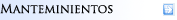
<style>
.page{position:relative;width:177px;height:20px}
.page>*{position:absolute;margin:0}
.t1{font:12px "TrajanPro-Regular";color:#050505}
</style>
<div class="page">
<p class="t1" style="left:0px;top:3px;width:113px;height:11px">Manteminientos</p>
</div>
